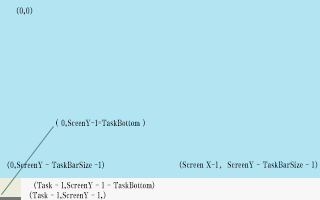
<style>
.page{position:relative;width:320px;height:200px;background:#b3e4f2}
.page>*{position:absolute;margin:0}
.t1{font:9px "FZQKBYSJW--GB1-0"}
.t2{font:9px "FZQKBYSJW--GB1-0";color:#000000}
</style>
<div class="page">
<p class="t1" style="left:16px;top:6px;width:17px;height:9px">(0,0)</p>
<p class="t2" style="left:56px;top:119px;width:89px;height:8px">（0,SceenY-1=TaskBottom）</p>
<p class="t2" style="left:7px;top:161px;width:97px;height:8px">(0,ScreenY - TaskBarSize -1)</p>
<p class="t2" style="left:179px;top:160px;width:139px;height:9px">(Screen X-1，ScreenY - TaskBarSize - 1)</p>
<p class="t1" style="left:34px;top:181px;width:121px;height:9px">(Task - 1,ScreenY - 1 - TaskBottom)</p>
<p class="t2" style="left:29px;top:191px;width:77px;height:9px">(Task - 1,ScreenY - 1,)</p>
</div>
